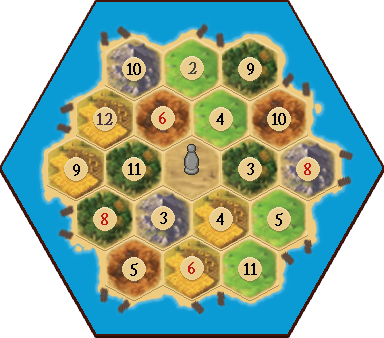
<style>
.page{position:relative;width:384px;height:338px;background:#ffffff}
.page>*{position:absolute;margin:0}
.t1{font:16.7px "ACaslonPro-Regular";letter-spacing:-0.075em;color:#000000;font-weight:bold}
.t2{font:16.7px "ACaslonPro-Regular";letter-spacing:-0.075em;color:#404040;font-weight:bold}
.t3{font:16.7px "ACaslonPro-Regular";color:#402e40;font-weight:bold}
.t4{font:16.7px "ACaslonPro-Regular";letter-spacing:-0.075em;color:#c11717;font-weight:bold}
</style>
<div class="page">
<p class="t1" style="left:127px;top:63px;width:14px;height:12px">10</p>
<p class="t2" style="left:188px;top:62px;width:9px;height:12px">2</p>
<p class="t1" style="left:247px;top:63px;width:7px;height:12px">9</p>
<p class="t3" style="left:97px;top:113px;width:16px;height:12px">12</p>
<p class="t4" style="left:159px;top:112px;width:7px;height:12px">6</p>
<p class="t1" style="left:216px;top:113px;width:8px;height:12px">4</p>
<p class="t1" style="left:272px;top:113px;width:14px;height:12px">10</p>
<p class="t1" style="left:73px;top:164px;width:7px;height:12px">9</p>
<p class="t1" style="left:128px;top:163px;width:13px;height:12px">11</p>
<p class="t1" style="left:247px;top:163px;width:7px;height:12px">3</p>
<p class="t4" style="left:304px;top:163px;width:7px;height:12px">8</p>
<p class="t4" style="left:101px;top:213px;width:7px;height:12px">8</p>
<p class="t1" style="left:160px;top:212px;width:7px;height:12px">3</p>
<p class="t1" style="left:216px;top:213px;width:8px;height:12px">4</p>
<p class="t1" style="left:275px;top:213px;width:8px;height:13px">5</p>
<p class="t1" style="left:130px;top:263px;width:8px;height:13px">5</p>
<p class="t4" style="left:188px;top:262px;width:7px;height:12px">6</p>
<p class="t1" style="left:244px;top:263px;width:13px;height:12px">11</p>
</div>
